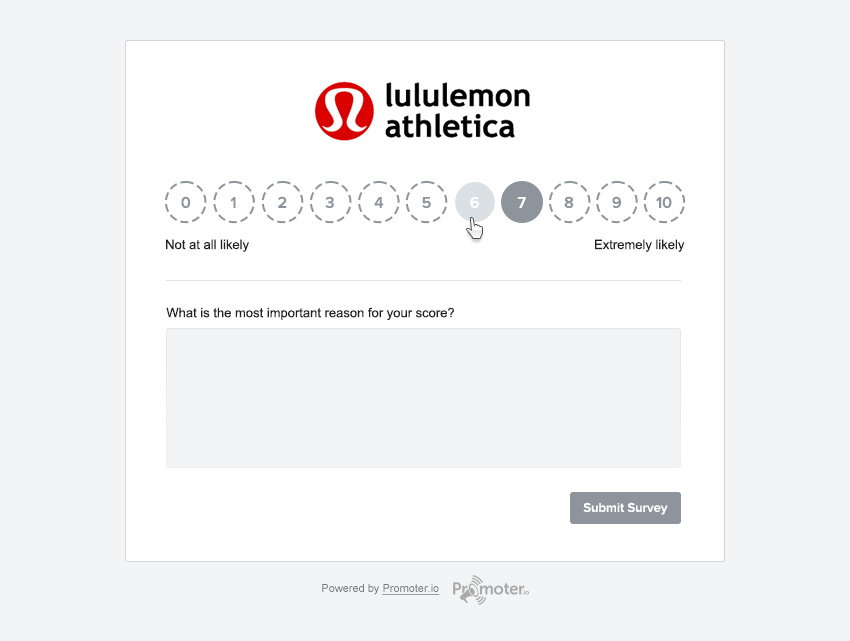
<style>
.page{position:relative;width:850px;height:641px;background:#f2f4f6}
.page>*{position:absolute;margin:0}
.t1{font:16.1px "ProximaNova-Semibold";color:#ffffff;text-transform:uppercase}
.t2{font:16.1px "ProximaNova-Semibold";letter-spacing:0.1em;color:#8d949c;text-transform:uppercase}
.t3{font:16.1px "ProximaNova-Semibold";letter-spacing:0.18em;color:#8d949c;text-transform:uppercase}
.t4{font:16.1px "ProximaNova-Semibold";color:#8d949c;text-transform:uppercase}
.t5{font:16.1px "ProximaNova-Semibold";letter-spacing:0.01em;color:#8d949c;text-transform:uppercase}
.t6{font:16.1px "ProximaNova-Semibold";letter-spacing:0.02em;color:#8d949c;text-transform:uppercase}
.t7{font:13px "ArialMT";color:#222222}
.t8{font:13px "ProximaNova-Semibold";color:#ffffff}
.t9{font:11px "ArialMT";color:#777777;text-decoration:underline}
.t10{font:11px "ArialMT";color:#777777}
</style>
<div class="page">
<p class="t1" style="left:181px;top:196px;width:440px;height:12px"><span class="t2">0 </span><span class="t3">1 </span><span class="t4">2 </span><span class="t5">3 </span><span class="t4">4 </span><span class="t6">5 </span>6 7 <span class="t4">8 9</span></p>
<p class="t4" style="left:656px;top:196px;width:16px;height:12px">10</p>
<p class="t7" style="left:166px;top:239px;width:83px;height:13px">Not at all likely</p>
<p class="t7" style="left:595px;top:239px;width:90px;height:13px">Extremely likely</p>
<p class="t7" style="left:166px;top:307px;width:288px;height:13px">What is the most important reason for your score?</p>
<p class="t8" style="left:583px;top:502px;width:85px;height:13px">Submit Survey</p>
<p class="t9" style="left:322px;top:584px;width:118px;height:11px"><span class="t10">Powered by </span>Promoter.io</p>
</div>
